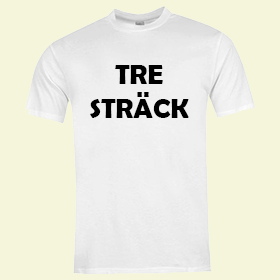
<style>
.page{position:relative;width:280px;height:280px;background:#f5f5dc}
.page>*{position:absolute;margin:0}
.t1{font:28px "BerlinSansFBDemi-Bold";color:#000000}
</style>
<div class="page">
<p class="t1" style="left:90px;top:65px;width:99px;height:53px;text-align:center">TRE<br>STRÄCK</p>
</div>
